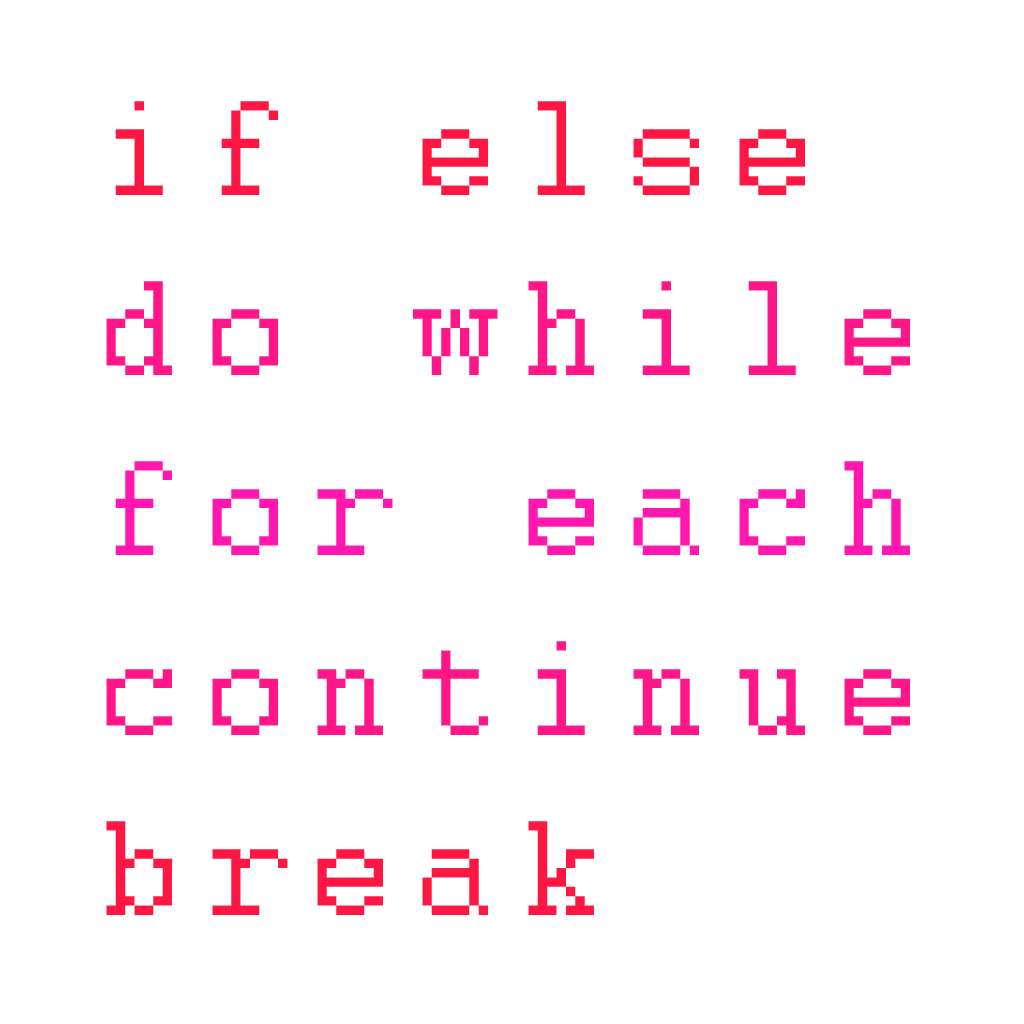
<style>
.page{position:relative;width:1024px;height:1024px;background:#ffffff}
.page>*{position:absolute;margin:0}
.t1{font:150px "Courier";letter-spacing:0.14em;color:#ff178a}
.t2{font:150px "Courier";letter-spacing:0.14em;color:#ff1744}
.t3{font:150px "Courier";letter-spacing:0.14em;color:#ff17b0}
</style>
<div class="page">
<p class="t1" style="left:106px;top:101px;width:804px;height:814px"><span class="t2">if else<br></span>do while<br><span class="t3">for each<br></span>continue<br><span class="t2">break</span></p>
</div>
